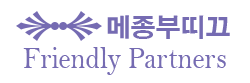
<style>
.page{position:relative;width:250px;height:83px;background:#ffffff}
.page>*{position:absolute;margin:0}
.t1{font:25px "H2gtrE";color:#756bb2}
.t2{font:30.8px "BellMT";color:#756bb2;scale:0.91 1}
</style>
<div class="page">
<p class="t1" style="left:107px;top:15px;width:123px;height:24px">메종부띠끄</p>
<p class="t2" style="left:23px;top:47px;width:203px;height:28px">Friendly Partners</p>
</div>
